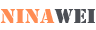
<style>
.page{position:relative;width:96px;height:30px;background:#ffffff}
.page>*{position:absolute;margin:0}
.t1{font:21.2px "Stencil";color:#ff8c53;scale:1.09 1}
.t2{font:21.2px "Stencil";color:#4c4f55;scale:1.09 1}
</style>
<div class="page">
<p class="t1" style="left:0px;top:9px;width:95px;height:14px">nina<span class="t2">WEI</span></p>
</div>
